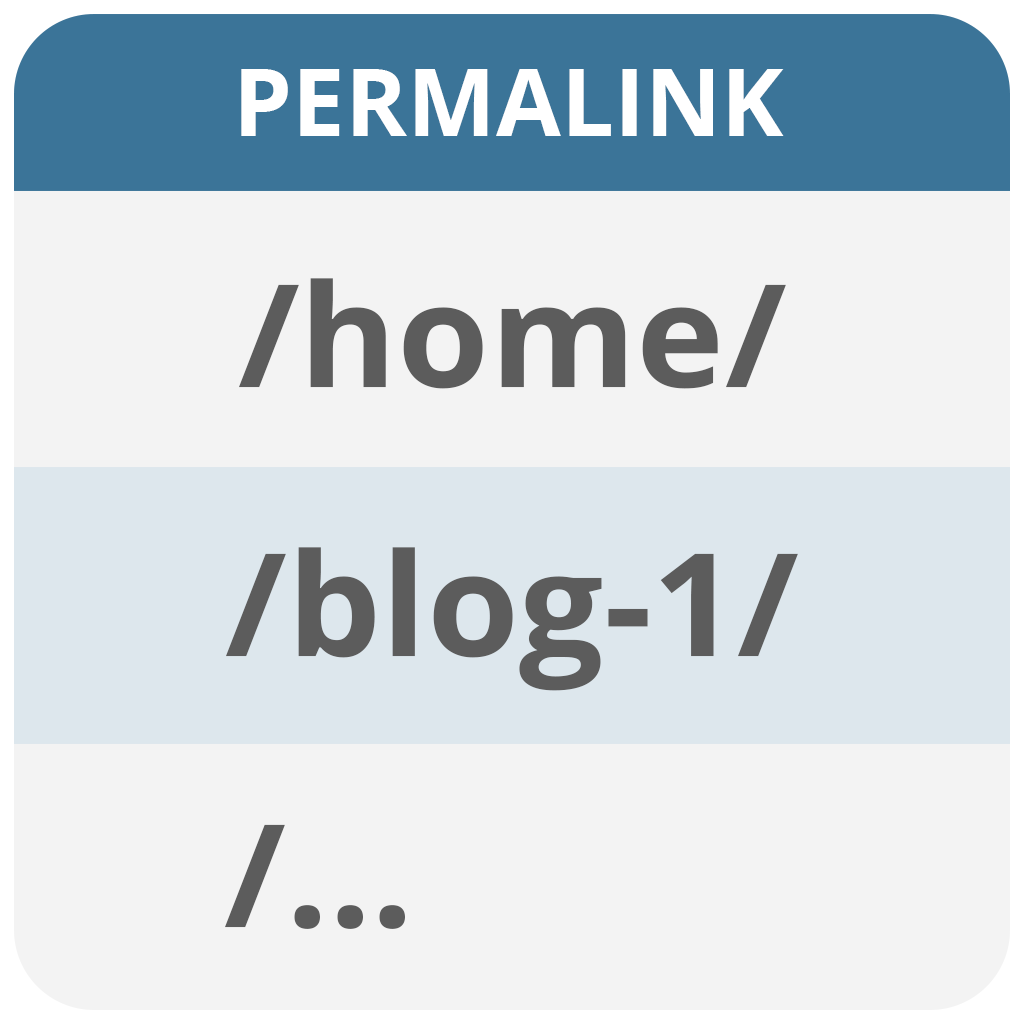
<style>
.page{position:relative;width:1024px;height:1024px;background:#f3f3f3}
.page>*{position:absolute;margin:0}
.t1{font:94px "OpenSans-Bold";color:#ffffff}
.t2{font:142.7px "OpenSans-Bold";color:#5c5c5c;scale:1.05 1}
</style>
<div class="page">
<p class="t1" style="left:241px;top:69px;width:543px;height:67px">PERMALINK</p>
<p class="t2" style="left:239px;top:278px;width:547px;height:111px">/home/</p>
<p class="t2" style="left:226px;top:547px;width:572px;height:144px">/blog-1/</p>
<p class="t2" style="left:225px;top:824px;width:180px;height:105px">/...</p>
</div>
